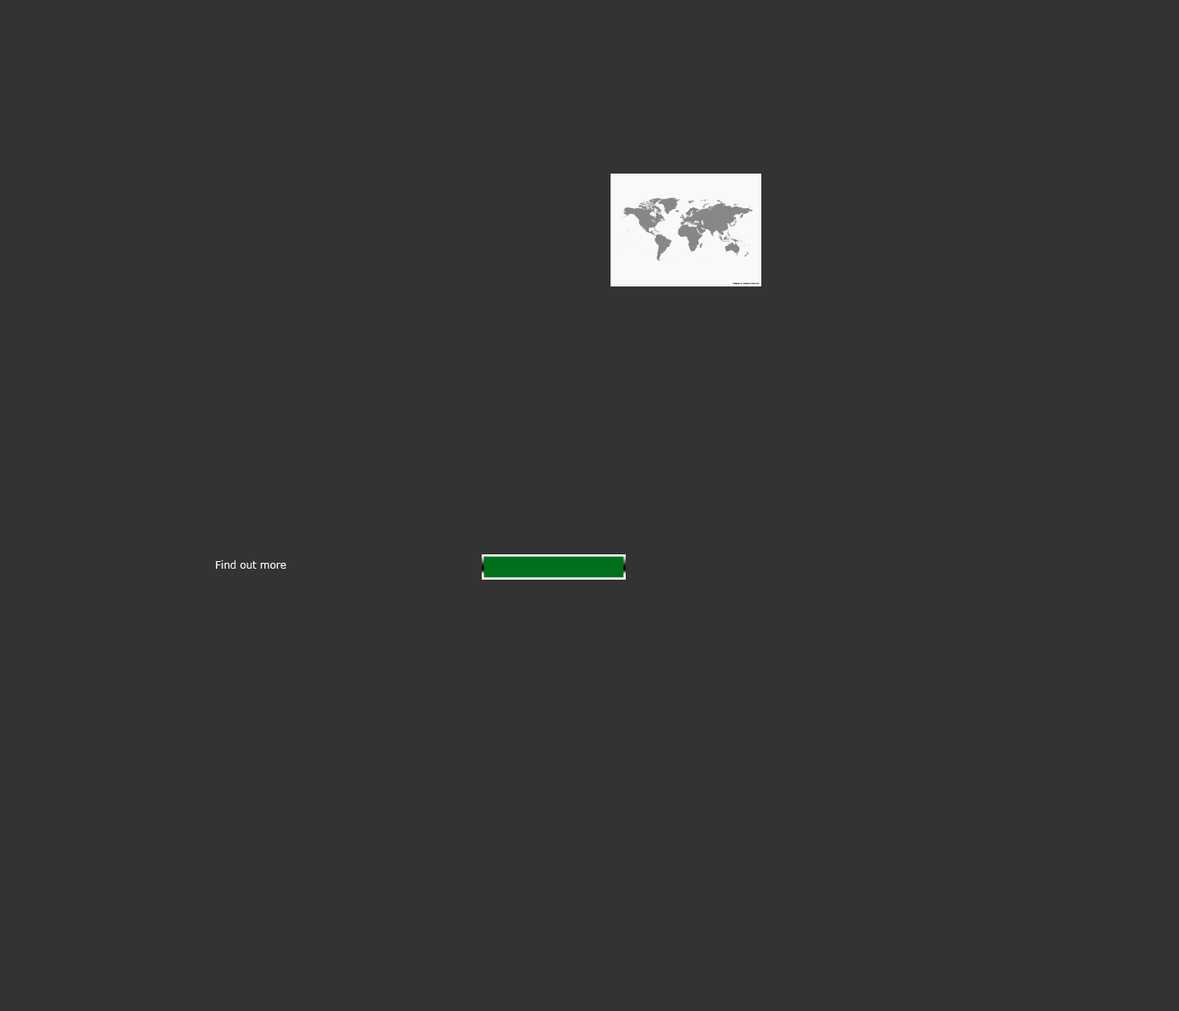
<style>
.page{position:relative;width:1179px;height:1011px;background:#333333}
.page>*{position:absolute;margin:0}
.t1{font:10.1px "Verdana";color:#ffffff}
</style>
<div class="page">
<p class="t1" style="left:216px;top:560px;width:70px;height:9px">Find out more</p>
</div>
